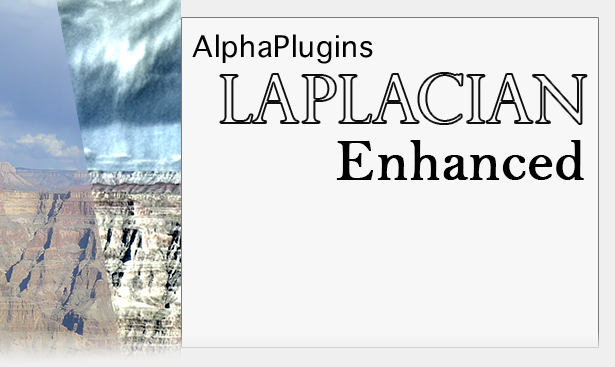
<style>
.page{position:relative;width:615px;height:367px;background:#f7f7f7}
.page>*{position:absolute;margin:0}
.t1{font:40.2px "AppleSymbols";letter-spacing:0.02em;color:#000000}
.t2{font:59px "BellMT";color:#000000;font-weight:bold}
</style>
<div class="page">
<p class="t1" style="left:192px;top:34px;width:181px;height:30px">AlphaPlugins</p>
<p class="t2" style="left:336px;top:140px;width:248px;height:40px">Enhanced</p>
</div>
